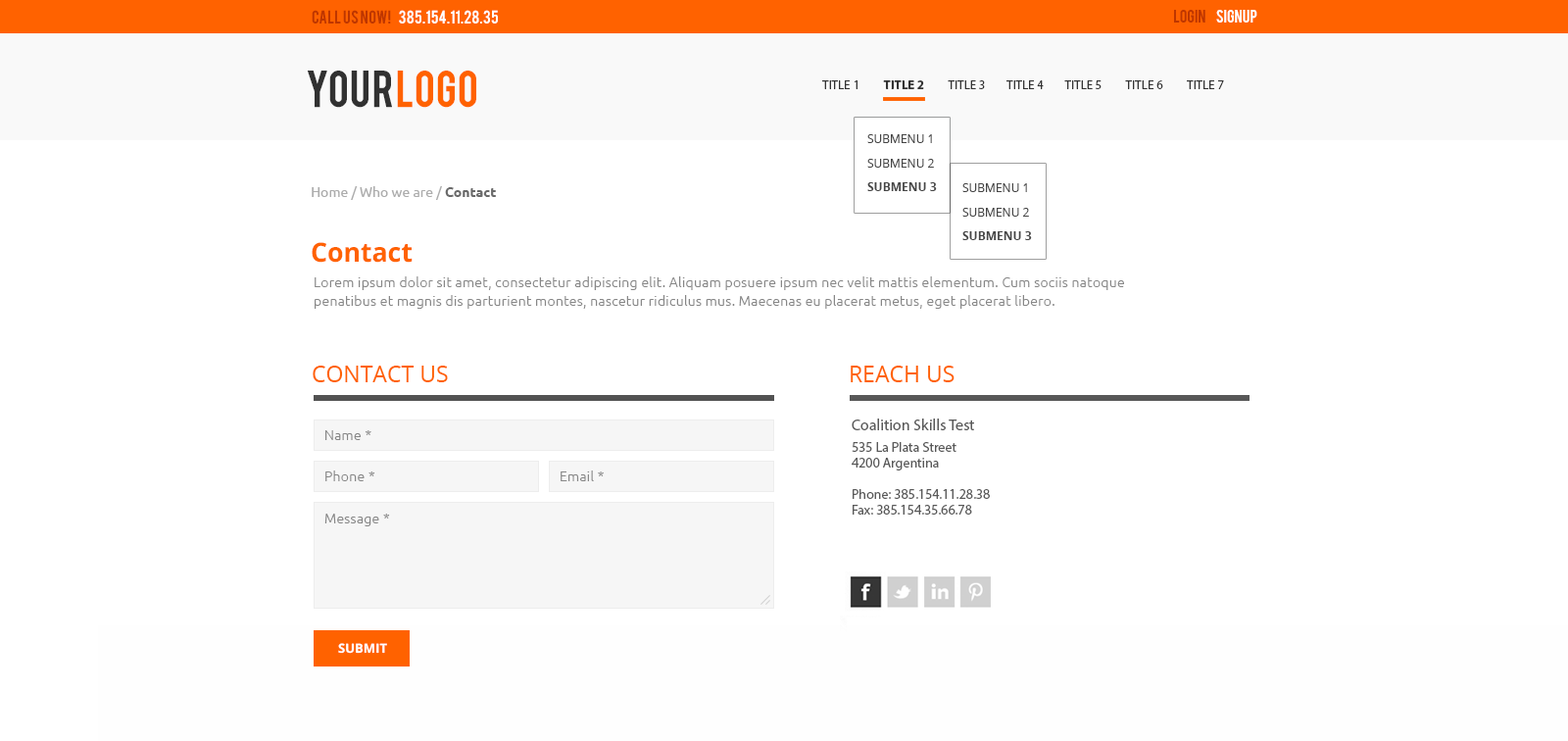
<style>
.page{position:relative;width:1568px;height:741px;background:#ffffff}
.page>*{position:absolute;margin:0}
.t1{font:14.5px "Bebas";letter-spacing:0.01em;color:#ffffff;text-transform:uppercase}
.t2{font:14.5px "Bebas";letter-spacing:0.01em;color:#be3600;text-transform:uppercase}
.t3{font:14.3px "Bebas";letter-spacing:0.01em;color:#ffffff;text-transform:uppercase}
.t4{font:14.3px "Bebas";letter-spacing:0.01em;color:#be3600;text-transform:uppercase}
.t5{font:40.3px "Bebas";letter-spacing:0.01em;color:#313131;text-transform:uppercase}
.t6{font:40.3px "Bebas";letter-spacing:0.01em;color:#ff6200;text-transform:uppercase}
.t7{font:12.7px "MyriadPro-Regular";color:#333333;text-transform:uppercase}
.t8{font:12.7px "MyriadPro-Bold";color:#333333;text-transform:uppercase}
.t9{font:11.8px/24.2px "OpenSans";color:#454545}
.t10{font:11.8px/24.2px "OpenSans-Bold";color:#454545}
.t11{font:13.7px "Ubuntu"}
.t12{font:13.7px "Ubuntu-Bold"}
.t13{font:26.4px "OpenSans-Bold";color:#ff6200}
.t14{font:13.7px/18.6px "Ubuntu-Light";letter-spacing:0.02em;color:#878787}
.t15{font:22.5px "OpenSans";color:#ff6200}
.t16{font:13.7px/15.7px "MyriadPro-Regular";color:#595959}
.t17{font:15.7px/5.9px "MyriadPro-Regular";color:#595959}
.t18{font:13.7px "Ubuntu-Light";letter-spacing:0.02em;color:#878787}
.t19{font:12.8px "OpenSans-Bold";color:#ffffff}
</style>
<div class="page">
<p class="t1" style="left:312px;top:10px;width:186px;height:14px"><span class="t2">CALL US NOW!     </span>385.154.11.28.35</p>
<p class="t3" style="left:1174px;top:10px;width:83px;height:13px"><span class="t4">           LOGIN       </span>SIGNUP</p>
<p class="t5" style="left:307px;top:71px;width:169px;height:37px">YOUR<span class="t6">LOGO</span></p>
<p class="t7" style="left:822px;top:80px;width:402px;height:9px">title 1         <span class="t8">title 2         </span>title 3        title 4        title 5         title 6         title 7</p>
<p class="t9" style="left:867px;top:134px;width:70px;height:57px">SUBMENU 1            <br>SUBMENU 2<br><span class="t10">SUBMENU 3</span></p>
<p class="t9" style="left:962px;top:183px;width:70px;height:57px">SUBMENU 1            <br>SUBMENU 2<br><span class="t10">SUBMENU 3</span></p>
<p class="t11" style="left:312px;top:186px;width:184px;height:14px">Home / Who we are / <span class="t12">Contact</span></p>
<p class="t13" style="left:312px;top:242px;width:101px;height:21px">Contact</p>
<p class="t14" style="left:315px;top:276px;width:809px;height:33px">Lorem ipsum dolor sit amet, consectetur adipiscing elit. Aliquam posuere ipsum nec velit mattis elementum. Cum sociis natoque <br>penatibus et magnis dis parturient montes, nascetur ridiculus mus. Maecenas eu placerat metus, eget placerat libero.</p>
<p class="t15" style="left:313px;top:366px;width:135px;height:16px">CONTACT US</p>
<p class="t15" style="left:851px;top:366px;width:104px;height:16px">REACH US</p>
<p class="t16" style="left:852px;top:418px;width:138px;height:96px"><span class="t17">Coalition Skills Test<br><br></span>535 La Plata Street<br>4200 Argentina<br><br>Phone: 385.154.11.28.38<br>Fax: 385.154.35.66.78</p>
<p class="t18" style="left:325px;top:430px;width:46px;height:10px">Name *</p>
<p class="t18" style="left:325px;top:470px;width:50px;height:11px">Phone *</p>
<p class="t18" style="left:561px;top:470px;width:43px;height:11px">Email *</p>
<p class="t18" style="left:324px;top:514px;width:66px;height:12px">Message *</p>
<p class="t19" style="left:338px;top:643px;width:49px;height:11px">SUBMIT</p>
</div>
